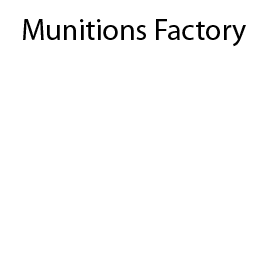
<style>
.page{position:relative;width:256px;height:256px;background:#ffffff}
.page>*{position:absolute;margin:0}
.t1{font:30px "MyriadPro-Regular";color:#000000}
</style>
<div class="page">
<p class="t1" style="left:23px;top:19px;width:223px;height:28px">Munitions Factory</p>
</div>
